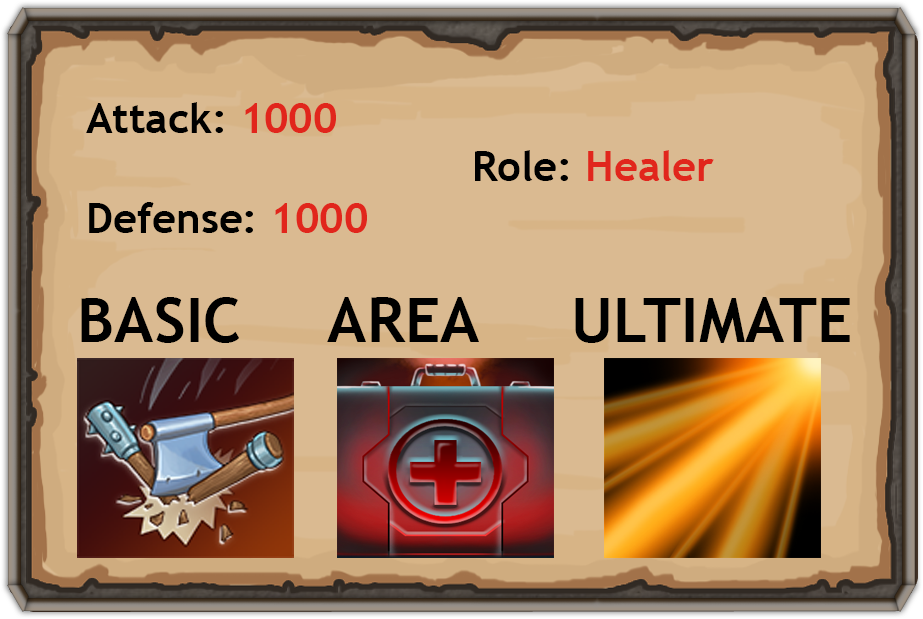
<style>
.page{position:relative;width:923px;height:619px;background:#daba91}
.page>*{position:absolute;margin:0}
.t1{font:41.7px "TrebuchetMS-Bold";color:#000000}
.t2{font:41.7px "TrebuchetMS-Bold";color:#e1261c}
.t3{font:62.5px "TrebuchetMS-Bold";color:#000000}
</style>
<div class="page">
<p class="t1" style="left:86px;top:102px;width:281px;height:131px">Attack: <span class="t2">1000 <br></span><br>Defense: <span class="t2">1000</span></p>
<p class="t2" style="left:475px;top:150px;width:239px;height:31px"><span class="t1">Role: </span>Healer</p>
<p class="t3" style="left:81px;top:297px;width:769px;height:46px">BASIC    AREA     ULTIMATE</p>
</div>
